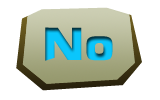
<style>
.page{position:relative;width:160px;height:100px;background:#ffffff}
.page>*{position:absolute;margin:0}
.t1{font:48px "HYk2gj";color:#0ac6fc}
</style>
<div class="page">
<p class="t1" style="left:45px;top:27px;width:68px;height:34px">No</p>
</div>
